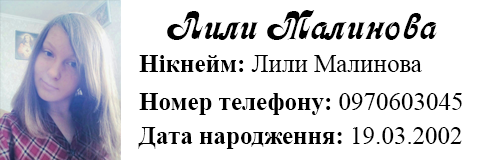
<style>
.page{position:relative;width:480px;height:160px;background:#ffffff}
.page>*{position:absolute;margin:0}
.t1{font:41.7px "Asessor";color:#000000}
.t2{font:25px "TimesNewRomanPSMT";color:#000000}
.t3{font:25px "TimesNewRomanPS-BoldMT";color:#000000}
</style>
<div class="page">
<p class="t1" style="left:167px;top:10px;width:270px;height:30px">Лили Малинова</p>
<p class="t2" style="left:139px;top:55px;width:283px;height:17px"><span class="t3">Нікнейм: </span>Лили Малинова</p>
<p class="t3" style="left:139px;top:93px;width:323px;height:22px">Номер телефону: <span class="t2">0970603045</span></p>
<p class="t3" style="left:138px;top:127px;width:324px;height:22px">Дата народження: <span class="t2">19.03.2002</span></p>
</div>
